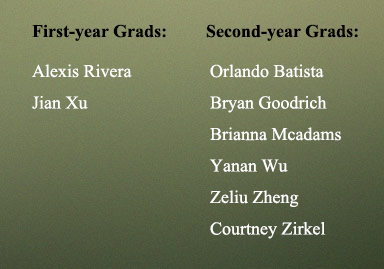
<style>
.page{position:relative;width:384px;height:269px}
.page>*{position:absolute;margin:0}
.t1{font:18px "TimesNewRomanPS-BoldMT";color:#000000}
.t2{font:18px "TimesNewRomanPSMT";color:#ffffff}
</style>
<div class="page">
<p class="t1" style="left:32px;top:24px;width:134px;height:17px">First-year Grads:</p>
<p class="t1" style="left:206px;top:24px;width:152px;height:17px">Second-year Grads:</p>
<p class="t2" style="left:32px;top:64px;width:100px;height:45px">Alexis Rivera<br>Jian Xu</p>
<p class="t2" style="left:210px;top:64px;width:131px;height:175px">Orlando Batista<br>Bryan Goodrich<br>Brianna Mcadams<br>Yanan Wu<br>Zeliu Zheng<br>Courtney Zirkel</p>
</div>
